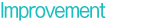
<style>
.page{position:relative;width:154px;height:21px;background:#ffffff}
.page>*{position:absolute;margin:0}
.t1{font:20px "GothicMB101Pro-Regular";letter-spacing:-0.06em;color:#1dbcc0;scale:0.9 1}
</style>
<div class="page">
<p class="t1" style="left:1px;top:2px;width:105px;height:19px">Improvement</p>
</div>
